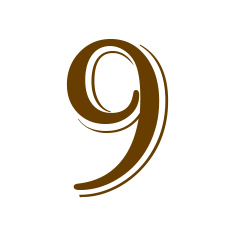
<style>
.page{position:relative;width:240px;height:240px;background:#ffffff}
.page>*{position:absolute;margin:0}
.t1{font:203.2px "Algerian";color:#683e00}
</style>
<div class="page">
<p class="t1" style="left:66px;top:39px;width:103px;height:159px">9</p>
</div>
